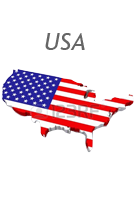
<style>
.page{position:relative;width:136px;height:200px;background:#ffffff}
.page>*{position:absolute;margin:0}
.t1{font:24px "TrebuchetMS-Italic";color:#666666}
</style>
<div class="page">
<p class="t1" style="left:45px;top:33px;width:40px;height:17px">USA</p>
</div>
